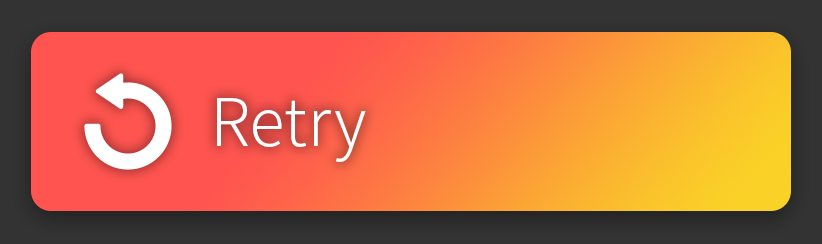
<style>
.page{position:relative;width:822px;height:244px}
.page>*{position:absolute;margin:0}
.t1{font:66px "NotoSansCJKkr-Light";color:#ffffff}
</style>
<div class="page">
<p class="t1" style="left:217px;top:98px;width:149px;height:64px">Retry</p>
</div>
